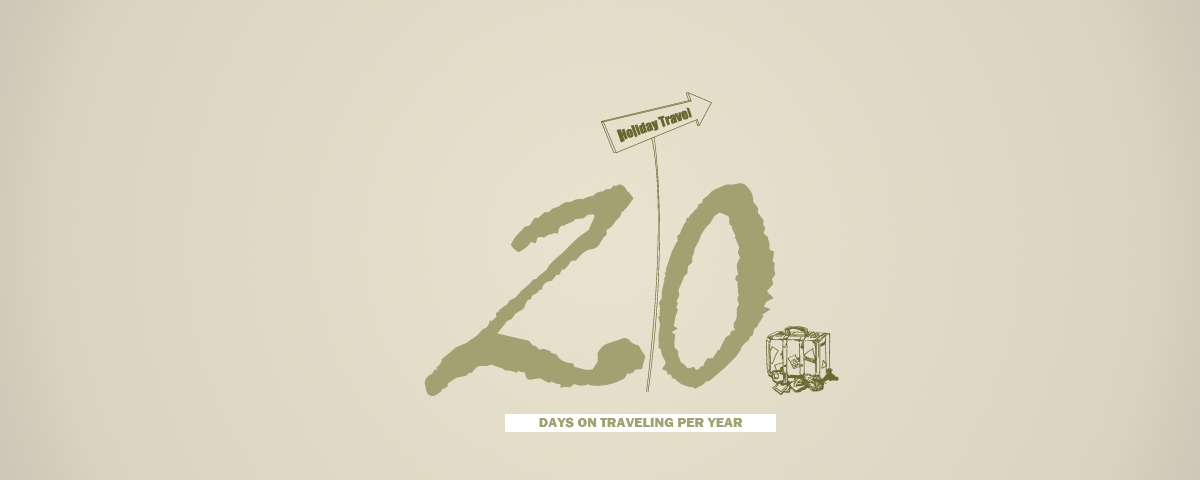
<style>
.page{position:relative;width:1200px;height:480px}
.page>*{position:absolute;margin:0}
.t1{font:300px "VinerHandITC";color:#a0a271}
.t2{font:14px "FranklinGothic-Heavy";color:#a0a271}
</style>
<div class="page">
<p class="t1" style="left:424px;top:183px;width:352px;height:213px">20</p>
<p class="t2" style="left:539px;top:417px;width:203px;height:11px">DAYS ON TRAVELING PER YEAR</p>
</div>
